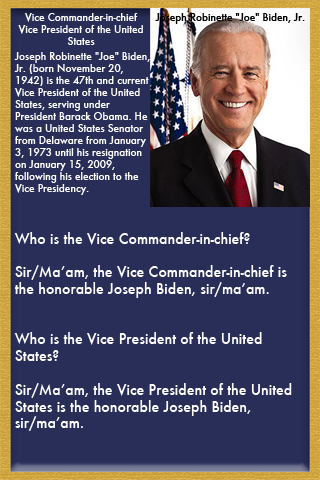
<style>
.page{position:relative;width:320px;height:480px;background:#292e59}
.page>*{position:absolute;margin:0}
.t1{font:10px "Futura-Medium";color:#ffffff}
.t2{font:10px "Futura-Medium";color:#000000}
.t3{font:14px "Futura-Medium";color:#ffffff}
</style>
<div class="page">
<p class="t1" style="left:18px;top:13px;width:125px;height:32px;text-align:center">Vice Commander-in-chief<br>Vice President of the United<br>States</p>
<p class="t2" style="left:155px;top:13px;width:150px;height:11px">Joseph Robinette "Joe" Biden, Jr.</p>
<p class="t1" style="left:14px;top:52px;width:136px;height:143px">Joseph Robinette "Joe" Biden, <br>Jr. (born November 20, <br>1942) is the 47th and current <br>Vice President of the United <br>States, serving under <br>President Barack Obama. He <br>was a United States Senator <br>from Delaware from January <br>3, 1973 until his resignation <br>on January 15, 2009, <br>following his election to the <br>Vice Presidency.</p>
<p class="t3" style="left:14px;top:232px;width:278px;height:199px">Who is the Vice Commander-in-chief?<br><br>Sir/Ma’am, the Vice Commander-in-chief is <br>the honorable Joseph Biden, sir/ma’am.<br><br><br>Who is the Vice President of the United <br>States?<br><br>Sir/Ma’am, the Vice President of the United <br>States is the honorable Joseph Biden, <br>sir/ma’am.</p>
</div>
